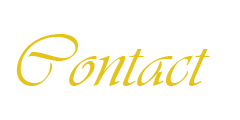
<style>
.page{position:relative;width:240px;height:120px;background:#ffffff}
.page>*{position:absolute;margin:0}
.t1{font:75px "Vivaldii";color:#e6c319}
</style>
<div class="page">
<p class="t1" style="left:16px;top:34px;width:194px;height:52px">Contact</p>
</div>
